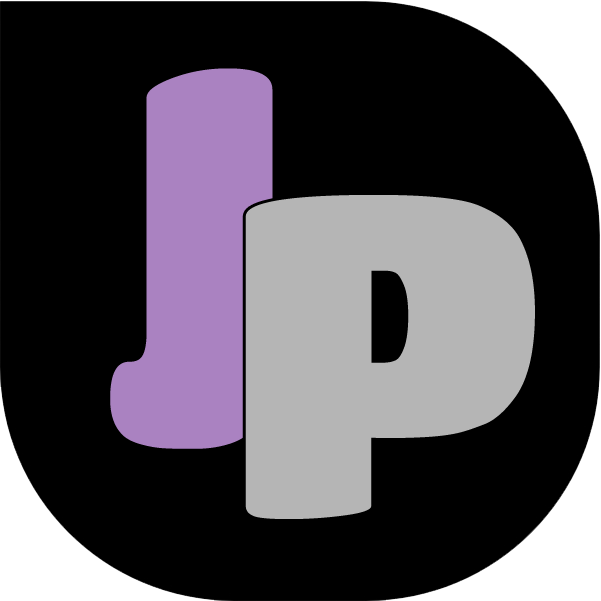
<style>
.page{position:relative;width:601px;height:601px;background:#000000}
.page>*{position:absolute;margin:0}
.t1{font:450px "TitanOne";color:#aa82c1}
.t2{font:450px "TitanOne";color:#b5b5b5}
</style>
<div class="page">
<p class="t1" style="left:110px;top:68px;width:163px;height:381px">J</p>
<p class="t2" style="left:245px;top:195px;width:290px;height:324px">P</p>
</div>
